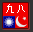
<style>
.page{position:relative;width:33px;height:32px;background:#f20000}
.page>*{position:absolute;margin:0}
.t1{font:10.4px "SimSun";color:#ffffff}
</style>
<div class="page">
<p class="t1" style="left:6px;top:4px;width:19px;height:9px">九八</p>
</div>
